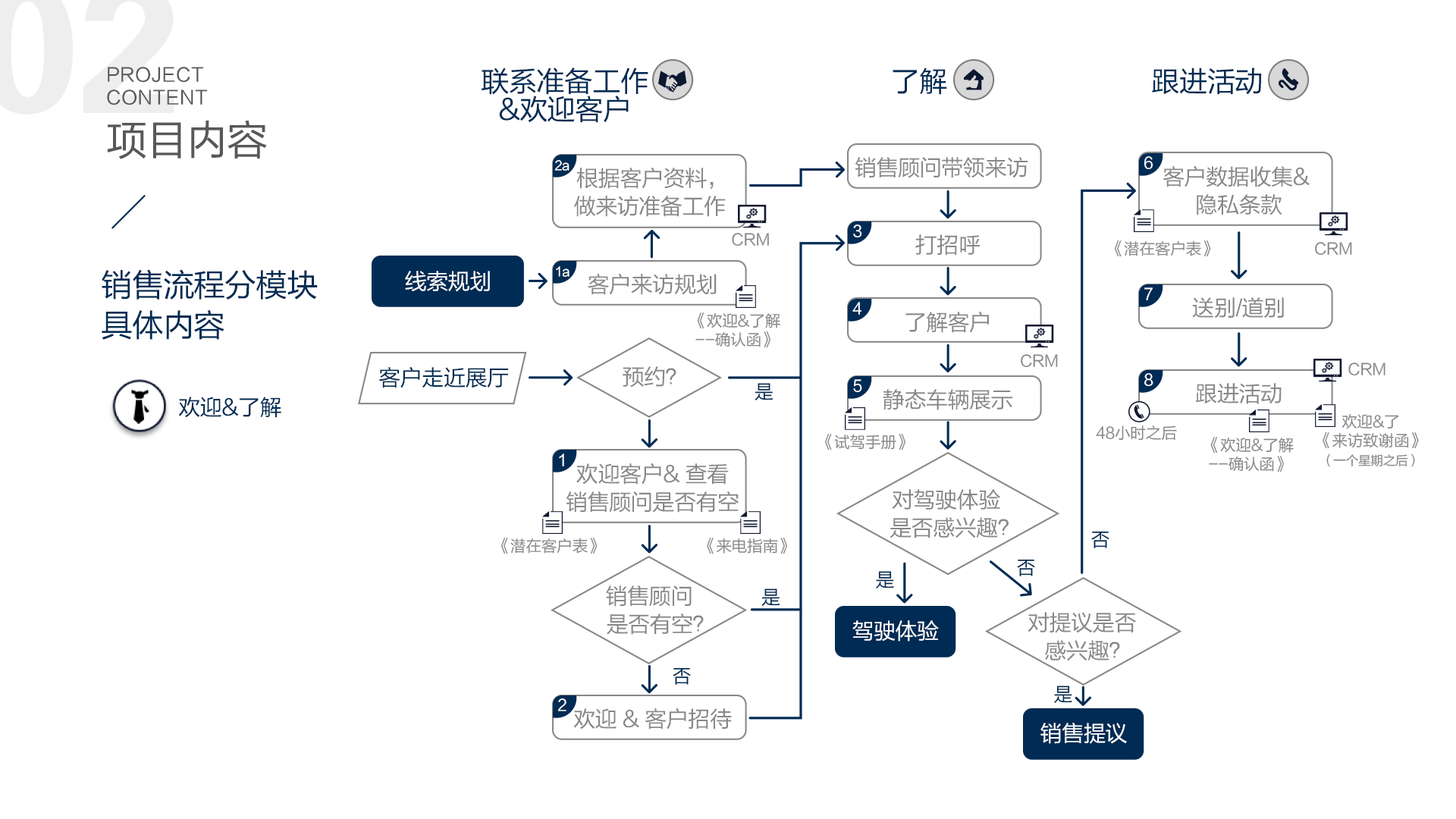
<style>
.page{position:relative;width:1456px;height:819px;background:#ffffff}
.page>*{position:absolute;margin:0}
.t1{font:18.8px "FZLTHJW--GB1-0";letter-spacing:0.02em;color:#595757}
.t2{font:28.4px/28.4px "FZLTHJW--GB1-0";letter-spacing:-0.02em;color:#002c54}
.t3{font:28.4px "FZLTHJW--GB1-0";letter-spacing:-0.02em;color:#002c54}
.t4{font:41.1px "FZLTHJW--GB1-0";letter-spacing:-0.02em;color:#595757}
.t5{font:12.6px "FZLTHJW--GB1-0";letter-spacing:-0.02em;color:#ffffff}
.t6{font:22.1px "FZLTHJW--GB1-0";letter-spacing:-0.02em;color:#888888}
.t7{font:15.8px "FZLTHJW--GB1-0";letter-spacing:-0.02em;color:#ffffff}
.t8{font:22.1px/28.4px "FZLTHJW--GB1-0";letter-spacing:-0.02em;color:#888888}
.t9{font:15.8px "FZLTHJW--GB1-0";letter-spacing:-0.02em;color:#888888}
.t10{font:31.6px/40.1px "FZLTHJW--GB1-0";letter-spacing:-0.02em;color:#002c54}
.t11{font:22.1px "FZLTHJW--GB1-0";letter-spacing:-0.02em;color:#ffffff}
.t12{font:15.8px/19px "FZLTHJW--GB1-0";letter-spacing:-0.02em;color:#888888}
.t13{font:22.1px "FZLTHJW--GB1-0";letter-spacing:-0.02em;color:#002c54}
.t14{font:19px "FZLTHJW--GB1-0";letter-spacing:-0.02em;color:#002c54}
.t15{font:12.6px/19px "FZLTHJW--GB1-0";letter-spacing:-0.02em;color:#888888}
</style>
<div class="page">
<p class="t1" style="left:107px;top:67px;width:101px;height:38px">PROJECT <br>CONTENT</p>
<p class="t2" style="left:482px;top:67px;width:166px;height:56px;text-align:center">联系准备工作<br>&amp;欢迎客户</p>
<p class="t3" style="left:893px;top:67px;width:54px;height:28px">了解</p>
<p class="t3" style="left:1152px;top:67px;width:110px;height:28px">跟进活动</p>
<p class="t4" style="left:107px;top:120px;width:160px;height:39px">项目内容</p>
<p class="t5" style="left:554px;top:160px;width:16px;height:11px">2a</p>
<p class="t6" style="left:855px;top:157px;width:173px;height:21px">销售顾问带领来访</p>
<p class="t7" style="left:1144px;top:156px;width:9px;height:14px">6</p>
<p class="t8" style="left:574px;top:167px;width:152px;height:50px;text-align:center">根据客户资料，<br>做来访准备工作</p>
<p class="t8" style="left:1163px;top:165px;width:147px;height:50px;text-align:center">客户数据收集&amp; <br>隐私条款</p>
<p class="t9" style="left:732px;top:233px;width:37px;height:13px">CRM</p>
<p class="t7" style="left:853px;top:224px;width:9px;height:14px">3</p>
<p class="t6" style="left:915px;top:234px;width:65px;height:22px">打招呼</p>
<p class="t9" style="left:1115px;top:240px;width:96px;height:17px">《潜在客户表》</p>
<p class="t9" style="left:1315px;top:242px;width:37px;height:14px">CRM</p>
<p class="t10" style="left:102px;top:269px;width:216px;height:71px">销售流程分模块<br>具体内容</p>
<p class="t5" style="left:556px;top:266px;width:14px;height:11px">1a</p>
<p class="t11" style="left:405px;top:271px;width:85px;height:21px">线索规划</p>
<p class="t6" style="left:588px;top:273px;width:129px;height:22px">客户来访规划</p>
<p class="t7" style="left:1144px;top:287px;width:9px;height:13px">7</p>
<p class="t7" style="left:852px;top:302px;width:9px;height:13px">4</p>
<p class="t6" style="left:1192px;top:297px;width:92px;height:21px">送别/道别</p>
<p class="t12" style="left:695px;top:312px;width:85px;height:36px;text-align:center">《欢迎&amp;了解<br>--确认函》</p>
<p class="t6" style="left:905px;top:311px;width:84px;height:22px">了解客户</p>
<p class="t9" style="left:1021px;top:354px;width:37px;height:14px">CRM</p>
<p class="t9" style="left:1348px;top:362px;width:37px;height:14px">CRM</p>
<p class="t13" style="left:379px;top:366px;width:130px;height:22px">客户走近展厅</p>
<p class="t6" style="left:623px;top:366px;width:53px;height:22px">预约？</p>
<p class="t7" style="left:1144px;top:373px;width:9px;height:14px">8</p>
<p class="t14" style="left:755px;top:383px;width:18px;height:17px">是</p>
<p class="t7" style="left:853px;top:379px;width:9px;height:14px">5</p>
<p class="t6" style="left:883px;top:389px;width:129px;height:21px">静态车辆展示</p>
<p class="t6" style="left:1195px;top:383px;width:87px;height:21px">跟进活动</p>
<p class="t13" style="left:178px;top:397px;width:103px;height:21px">欢迎&amp;了解</p>
<p class="t9" style="left:1096px;top:425px;width:81px;height:16px">48小时之后</p>
<p class="t12" style="left:1323px;top:414px;width:96px;height:53px;text-align:center">欢迎&amp;了<br>《来访致谢函》<br><span class="t15">（一个星期之后）</span></p>
<p class="t9" style="left:825px;top:434px;width:80px;height:16px">《试驾手册》</p>
<p class="t12" style="left:1209px;top:437px;width:85px;height:35px;text-align:center">《欢迎&amp;了解<br>--确认函》</p>
<p class="t7" style="left:559px;top:453px;width:5px;height:13px">1</p>
<p class="t8" style="left:566px;top:463px;width:173px;height:50px;text-align:center">欢迎客户&amp; 查看<br>销售顾问是否有空</p>
<p class="t8" style="left:890px;top:489px;width:119px;height:49px;text-align:center">对驾驶体验<br>   是否感兴趣？</p>
<p class="t14" style="left:1091px;top:531px;width:18px;height:17px">否</p>
<p class="t9" style="left:501px;top:538px;width:97px;height:16px">《潜在客户表》</p>
<p class="t9" style="left:707px;top:538px;width:80px;height:16px">《来电指南》</p>
<p class="t14" style="left:1017px;top:559px;width:18px;height:17px">否</p>
<p class="t14" style="left:876px;top:571px;width:18px;height:17px">是</p>
<p class="t8" style="left:606px;top:585px;width:98px;height:50px;text-align:center">销售顾问<br>    是否有空？</p>
<p class="t14" style="left:761px;top:588px;width:19px;height:18px">是</p>
<p class="t8" style="left:1028px;top:612px;width:108px;height:49px;text-align:center">对提议是否<br>  感兴趣？</p>
<p class="t11" style="left:852px;top:620px;width:87px;height:22px">驾驶体验</p>
<p class="t14" style="left:673px;top:667px;width:18px;height:18px">否</p>
<p class="t14" style="left:1054px;top:686px;width:18px;height:17px">是</p>
<p class="t7" style="left:558px;top:698px;width:8px;height:13px">2</p>
<p class="t6" style="left:573px;top:708px;width:159px;height:22px">欢迎 &amp; 客户招待</p>
<p class="t11" style="left:1040px;top:723px;width:87px;height:21px">销售提议</p>
</div>
